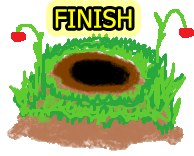
<style>
.page{position:relative;width:194px;height:156px;background:#ffffff}
.page>*{position:absolute;margin:0}
.t1{font:25px "Tahoma";color:#fcff05}
</style>
<div class="page">
<p class="t1" style="left:55px;top:9px;width:77px;height:19px">FINISH</p>
</div>
